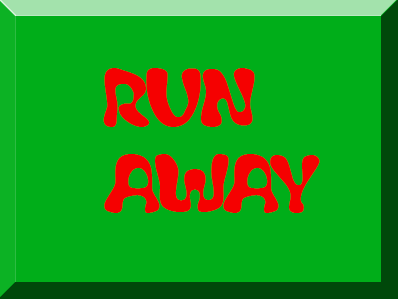
<style>
.page{position:relative;width:400px;height:300px;background:#00ae19}
.page>*{position:absolute;margin:0}
.t1{font:72px "Flubber";color:#f50101}
</style>
<div class="page">
<p class="t1" style="left:103px;top:68px;width:217px;height:145px">RUN AWAY</p>
</div>
